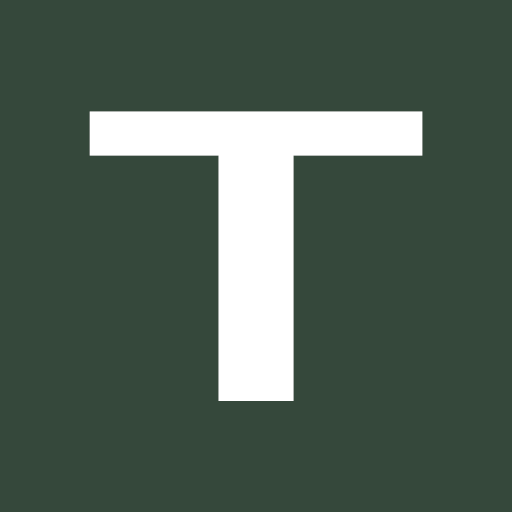
<style>
.page{position:relative;width:512px;height:512px;background:#35483b}
.page>*{position:absolute;margin:0}
.t1{font:398.4px "Inter-SemiBold";color:#ffffff;scale:1.44 1}
</style>
<div class="page">
<p class="t1" style="left:89px;top:111px;width:334px;height:290px">T</p>
</div>
